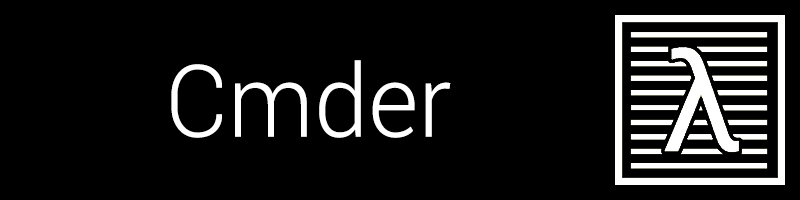
<style>
.page{position:relative;width:800px;height:200px;background:#000000}
.page>*{position:absolute;margin:0}
.t1{font:100px "Roboto-Light";color:#ffffff}
</style>
<div class="page">
<p class="t1" style="left:171px;top:60px;width:280px;height:78px">Cmder</p>
</div>
